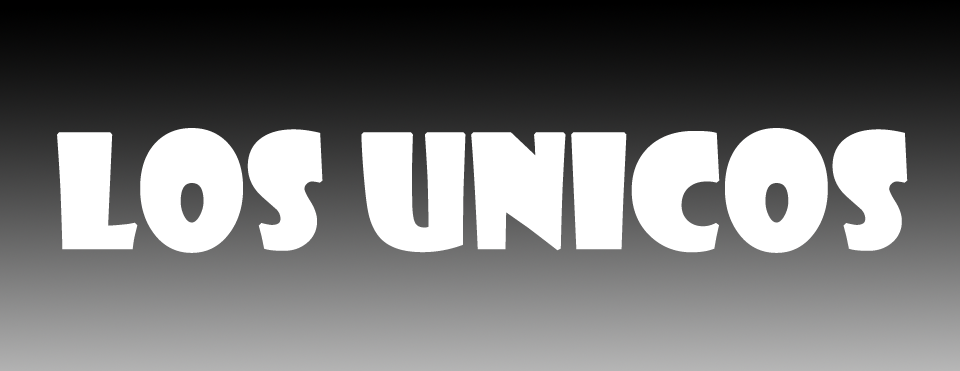
<style>
.page{position:relative;width:960px;height:371px}
.page>*{position:absolute;margin:0}
.t1{font:150px "ShowcardGothic-Reg";color:#ffffff;font-weight:bold}
</style>
<div class="page">
<p class="t1" style="left:57px;top:128px;width:851px;height:125px">LOS UNICOS</p>
</div>
